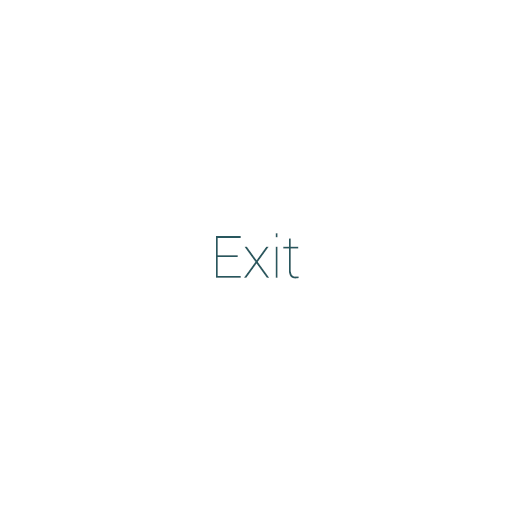
<style>
.page{position:relative;width:512px;height:512px;background:#ffffff}
.page>*{position:absolute;margin:0}
.t1{font:58.3px "Roboto-Thin";color:#28575e}
</style>
<div class="page">
<p class="t1" style="left:216px;top:233px;width:83px;height:46px">Exit</p>
</div>
